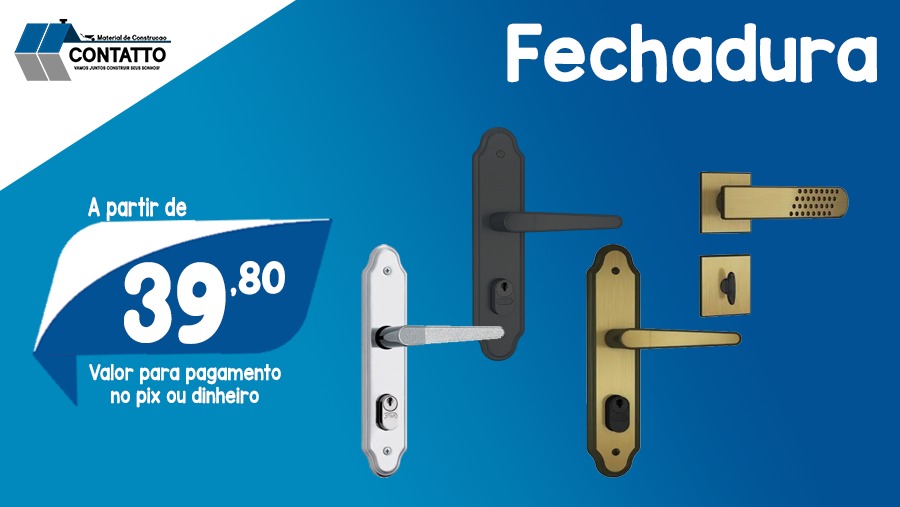
<style>
.page{position:relative;width:900px;height:507px;background:#015194}
.page>*{position:absolute;margin:0}
.t1{font:65.8px "KGRedHands";color:#ffffff}
.t2{font:21.9px "KGRedHands";color:#ffffff;scale:0.73 1}
.t3{font:103.6px "Lime-Days";color:#ffffff}
.t4{font:42px "Lime-Days";color:#ffffff;scale:1.03 1}
.t5{font:18.5px "KGRedHands";color:#ffffff;scale:0.84 1}
</style>
<div class="page">
<p class="t1" style="left:507px;top:23px;width:370px;height:60px">Fechadura</p>
<p class="t2" style="left:88px;top:197px;width:99px;height:24px">A partir de</p>
<p class="t3" style="left:124px;top:262px;width:102px;height:82px">39</p>
<p class="t4" style="left:230px;top:261px;width:55px;height:36px">,80</p>
<p class="t5" style="left:89px;top:364px;width:192px;height:44px;text-align:center">Valor para pagamento<br>no pix ou dinheiro</p>
</div>
